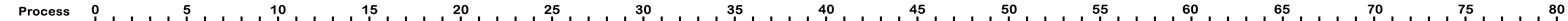
<style>
.page{position:relative;width:1568px;height:21px;background:#ffffff}
.page>*{position:absolute;margin:0}
.t1{font:12.6px "ArialRoundedMTBold";letter-spacing:0.02em;color:#000000;scale:1.06 1}
.t2{font:11.9px "ArialRoundedMTBold";letter-spacing:0.02em;color:#000000;scale:1.06 1}
</style>
<div class="page">
<p class="t1" style="left:92px;top:5px;width:7px;height:10px">0</p>
<p class="t1" style="left:183px;top:5px;width:8px;height:10px">5</p>
<p class="t1" style="left:270px;top:5px;width:16px;height:10px">10</p>
<p class="t1" style="left:362px;top:5px;width:16px;height:10px">15</p>
<p class="t1" style="left:453px;top:5px;width:15px;height:10px">20</p>
<p class="t1" style="left:544px;top:5px;width:16px;height:10px">25</p>
<p class="t1" style="left:636px;top:5px;width:15px;height:10px">30</p>
<p class="t1" style="left:727px;top:5px;width:16px;height:10px">35</p>
<p class="t1" style="left:818px;top:5px;width:16px;height:9px">40</p>
<p class="t1" style="left:909px;top:5px;width:16px;height:9px">45</p>
<p class="t1" style="left:1002px;top:5px;width:15px;height:9px">50</p>
<p class="t1" style="left:1093px;top:5px;width:15px;height:9px">55</p>
<p class="t1" style="left:1183px;top:5px;width:15px;height:9px">60</p>
<p class="t1" style="left:1274px;top:5px;width:16px;height:9px">65</p>
<p class="t1" style="left:1368px;top:5px;width:15px;height:9px">70</p>
<p class="t1" style="left:1458px;top:5px;width:15px;height:9px">75</p>
<p class="t1" style="left:1549px;top:5px;width:15px;height:9px">80</p>
<p class="t2" style="left:19px;top:7px;width:51px;height:9px">Process</p>
</div>
